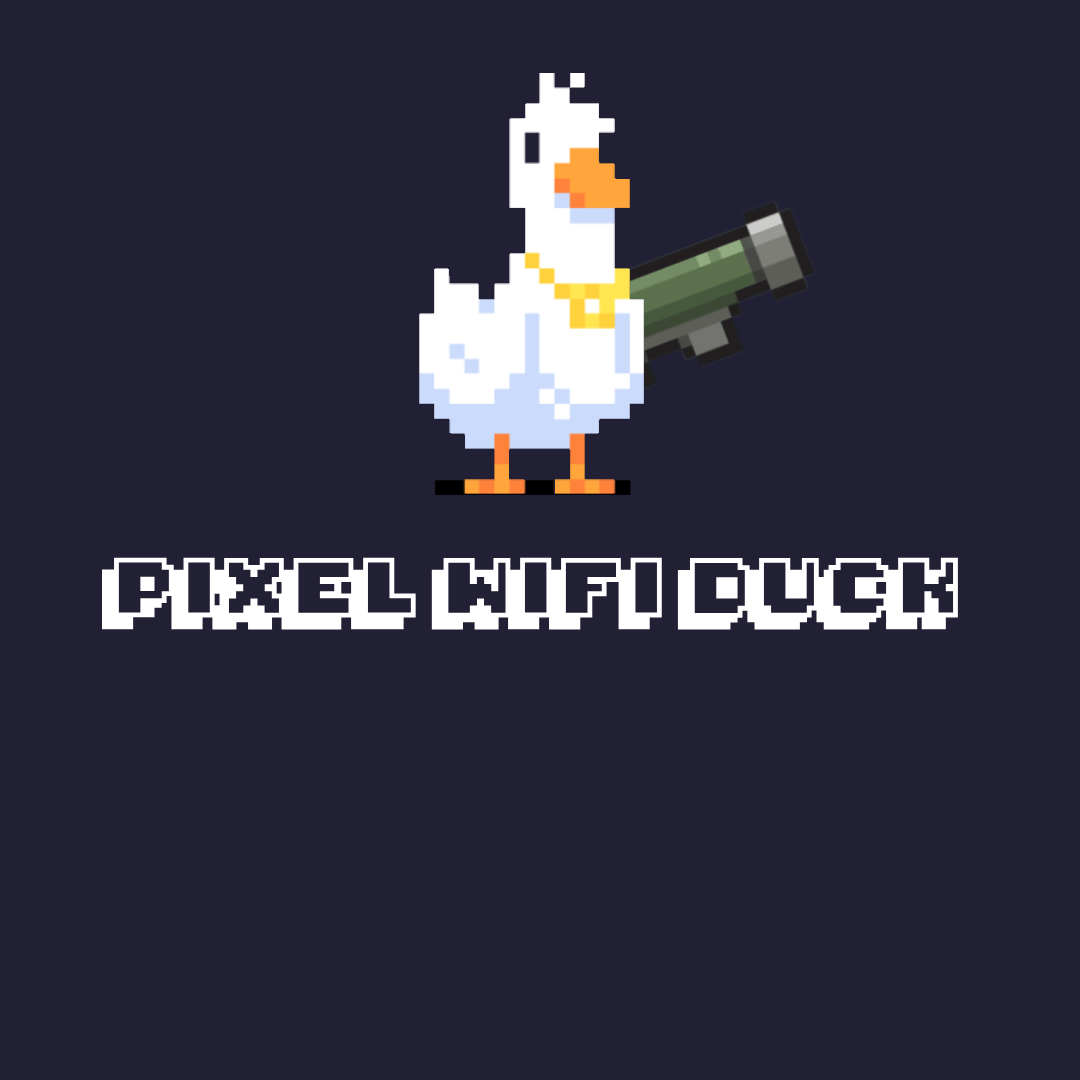
<style>
.page{position:relative;width:1080px;height:1080px;background:#222034}
.page>*{position:absolute;margin:0}
.t1{font:46px "Pixelmania";color:#ffffff}
</style>
<div class="page">
<p class="t1" style="left:102px;top:557px;width:856px;height:73px">PIXEL WIFI DUCK</p>
</div>
